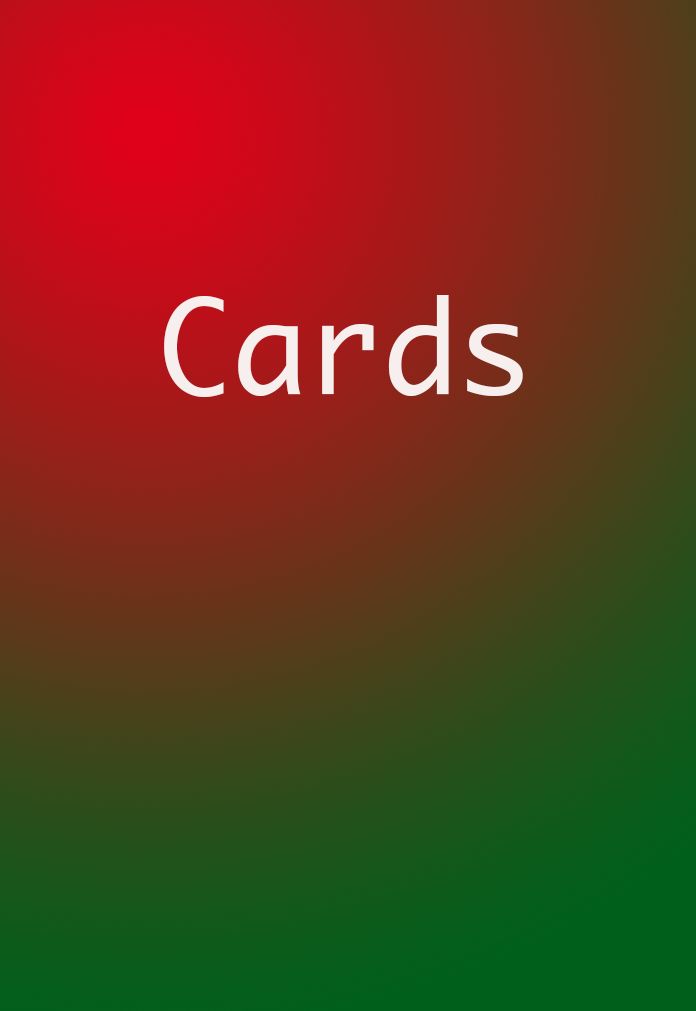
<style>
.page{position:relative;width:696px;height:1011px}
.page>*{position:absolute;margin:0}
.t1{font:125px "Ayuthaya";color:#f7eeee}
</style>
<div class="page">
<p class="t1" style="left:164px;top:295px;width:359px;height:102px">Cards</p>
</div>
